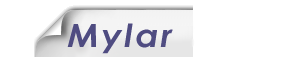
<style>
.page{position:relative;width:283px;height:57px;background:#ffffff}
.page>*{position:absolute;margin:0}
.t1{font:32px "CenturyGothic-BoldItalic";letter-spacing:0.075em;color:#4f4c81;scale:1.1 1}
</style>
<div class="page">
<p class="t1" style="left:67px;top:23px;width:106px;height:31px">Mylar</p>
</div>
